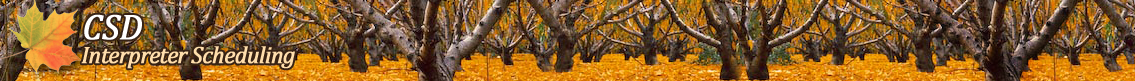
<style>
.page{position:relative;width:1135px;height:81px}
.page>*{position:absolute;margin:0}
.t1{font:36px "Cambria-Italic";letter-spacing:-0.05em;color:#ffffff;font-weight:bold}
.t2{font:36px "Cambria-Italic";letter-spacing:-0.01em;color:#ffffff;font-weight:bold}
.t3{font:24px "Cambria-Italic";letter-spacing:-0.05em;color:#ffdeac;font-weight:bold}
</style>
<div class="page">
<p class="t1" style="left:84px;top:14px;width:58px;height:26px"><span class="t2">C</span>SD</p>
<p class="t3" style="left:81px;top:46px;width:214px;height:23px">Interpreter Scheduling</p>
</div>
